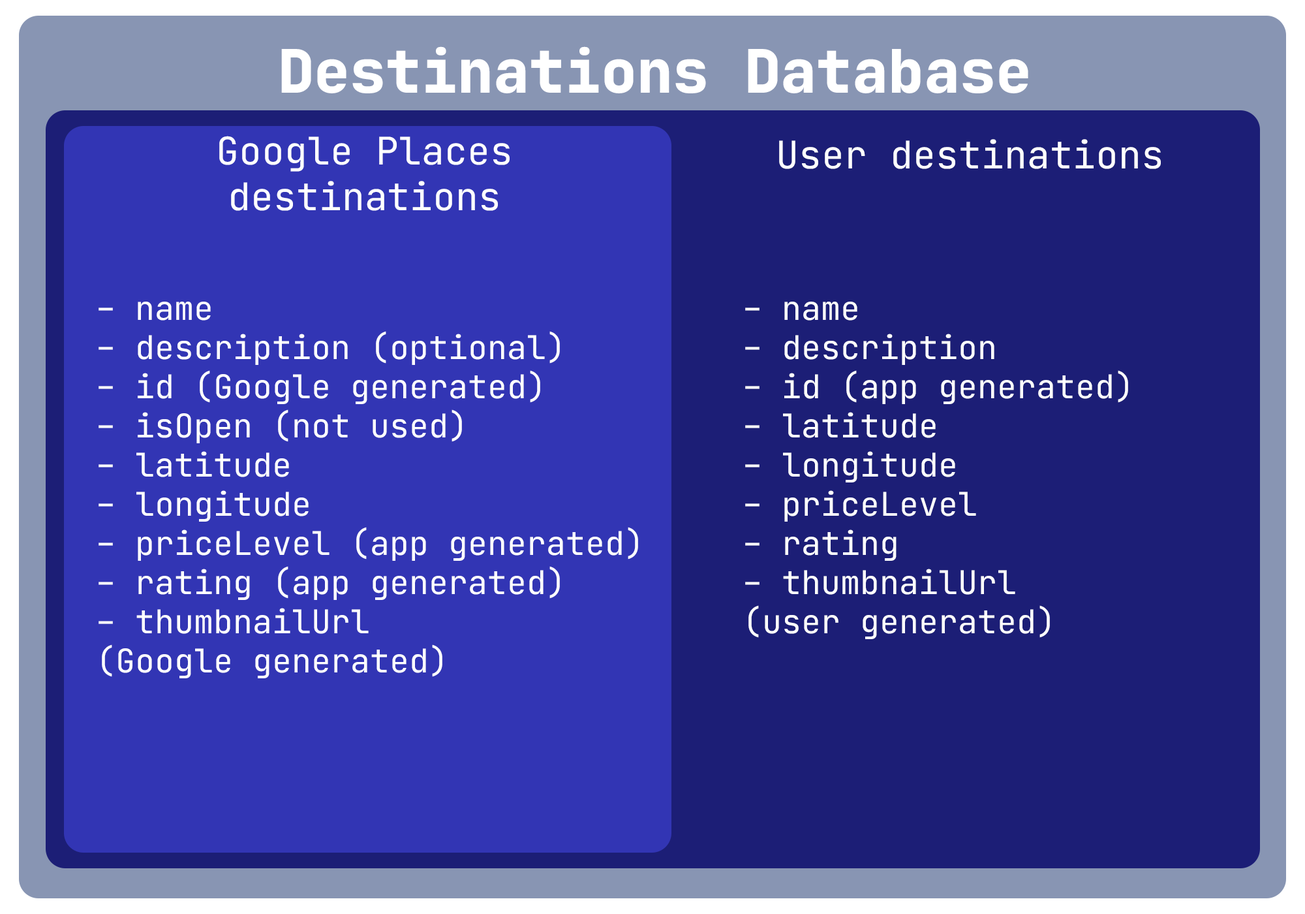
<style>
.page{position:relative;width:1305px;height:914px;background:#1c1e76}
.page>*{position:absolute;margin:0}
.t1{font:59.8px "JetBrainsMono-ExtraBold";color:#ffffff}
.t2{font:38.1px "JetBrainsMono-Variable";color:#ffffff}
.t3{font:7.8px "JetBrainsMono-Variable";color:#ffffff}
</style>
<div class="page">
<p class="t1" style="left:281px;top:46px;width:747px;height:47px">Destinations Database</p>
<p class="t2" style="left:219px;top:136px;width:291px;height:75px;text-align:center">Google Places<br>destinations</p>
<p class="t2" style="left:779px;top:139px;width:382px;height:30px">User destinations</p>
<p class="t3" style="left:99px;top:301px;width:539px;height:377px">- name<br>- description (optional)<br>- id (Google generated)<br>- isOpen (not used)<br>- latitude<br>- longitude<br>- priceLevel (app generated)<br>- rating (app generated)<br>- thumbnailUrl <br>(Google generated)</p>
<p class="t3" style="left:745px;top:301px;width:383px;height:338px">- name<br>- description<br>- id (app generated)<br>- latitude<br>- longitude<br>- priceLevel<br>- rating<br>- thumbnailUrl <br>(user generated)</p>
</div>
